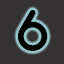
<style>
.page{position:relative;width:64px;height:64px;background:#343232}
.page>*{position:absolute;margin:0}
.t1{font:60px "Neon80s";color:#000000}
</style>
<div class="page">
<p class="t1" style="left:18px;top:10px;width:30px;height:41px">6</p>
</div>
